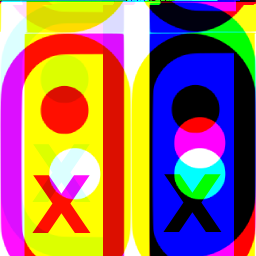
<style>
.page{position:relative;width:256px;height:256px}
.page>*{position:absolute;margin:0}
.t1{font:79.3px "DejaVuSans-Bold"}
</style>
<div class="page">
<p class="t1" style="left:32px;top:142px;width:59px;height:58px">X</p>
</div>
